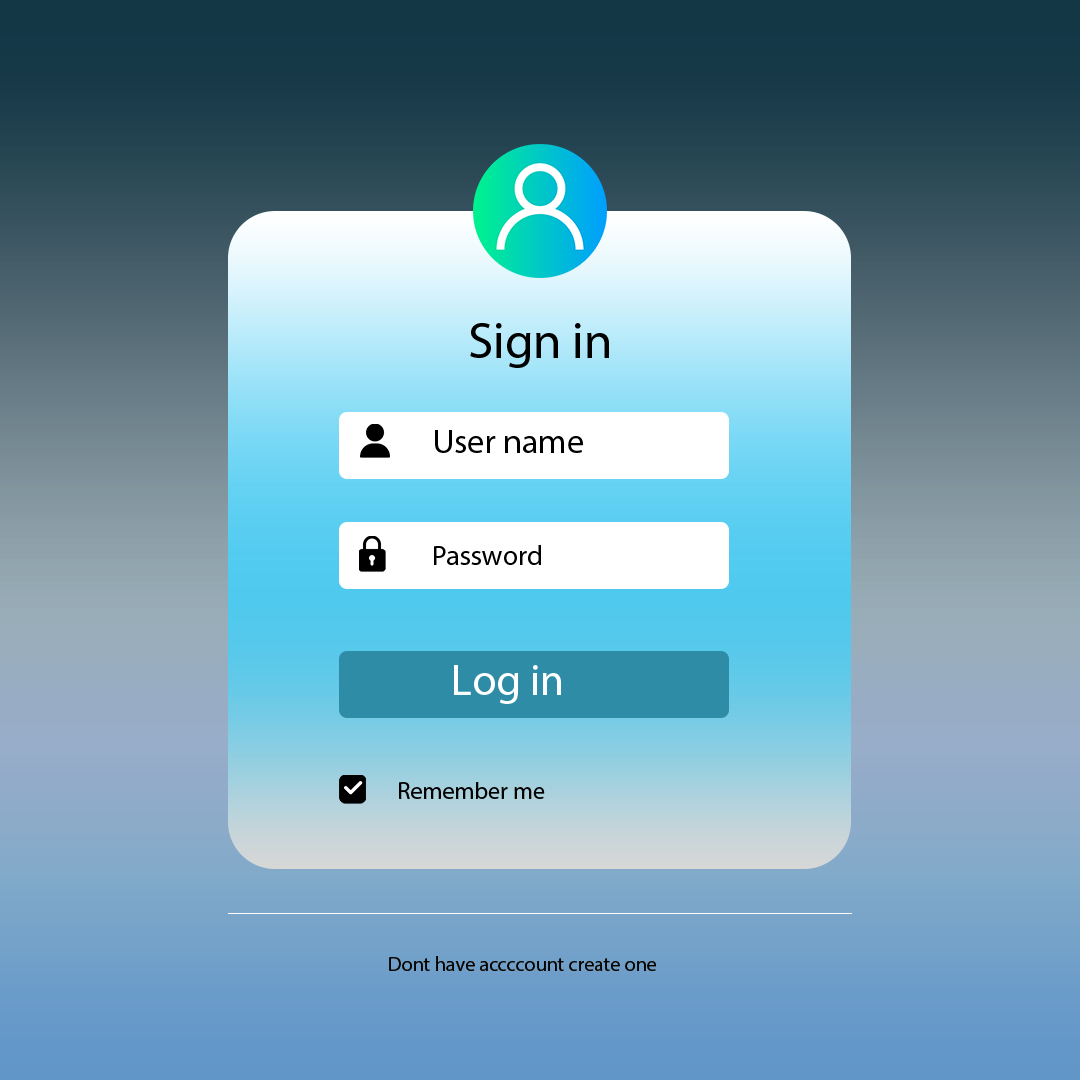
<style>
.page{position:relative;width:1080px;height:1080px}
.page>*{position:absolute;margin:0}
.t1{font:51.2px "MyriadPro-Regular";color:#000000}
.t2{font:34.2px "MyriadPro-Regular";color:#000000}
.t3{font:28.4px "MyriadPro-Regular";color:#000000}
.t4{font:44.2px "MyriadPro-Regular";color:#ffffff}
.t5{font:24px "MyriadPro-Regular";color:#000000}
.t6{font:20.2px "MyriadPro-Regular";color:#000000}
</style>
<div class="page">
<p class="t1" style="left:470px;top:323px;width:139px;height:45px">Sign in</p>
<p class="t2" style="left:435px;top:430px;width:148px;height:23px">User name</p>
<p class="t3" style="left:434px;top:545px;width:107px;height:20px">Password</p>
<p class="t4" style="left:454px;top:665px;width:107px;height:39px">Log in</p>
<p class="t5" style="left:399px;top:782px;width:146px;height:17px">Remember me</p>
<p class="t6" style="left:389px;top:956px;width:267px;height:15px">Dont have accccount create one</p>
</div>
